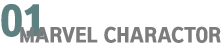
<style>
.page{position:relative;width:224px;height:45px;background:#ffffff}
.page>*{position:absolute;margin:0}
.t1{font:40px "KoreanTITGD5-R";color:#5d8080}
.t2{font:19.6px "KoreanTITGD5-R";color:#7d7c7c}
</style>
<div class="page">
<p class="t1" style="left:1px;top:4px;width:43px;height:33px">01</p>
<p class="t2" style="left:20px;top:26px;width:201px;height:17px">MARVEL CHARACTOR</p>
</div>
